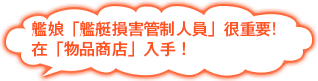
<style>
.page{position:relative;width:318px;height:81px;background:#ffffff}
.page>*{position:absolute;margin:0}
.t1{font:16px/20px "GothicMB101Pr6N-Medium";color:#fe5420}
</style>
<div class="page">
<p class="t1" style="left:31px;top:21px;width:245px;height:36px">艦娘「艦艇損害管制人員」很重要!<br>在「物品商店」入手！</p>
</div>
